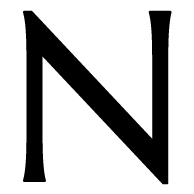
<style>
.page{position:relative;width:194px;height:194px;background:#ffffff}
.page>*{position:absolute;margin:0}
.t1{font:241.7px "MarcellusSC-Regular";letter-spacing:0.05em;color:#000000;font-variant:small-caps;font-weight:bold}
</style>
<div class="page">
<p class="t1" style="left:23px;top:10px;width:149px;height:175px">N</p>
</div>
